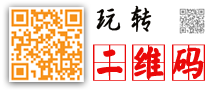
<style>
.page{position:relative;width:220px;height:91px;background:#ffffff}
.page>*{position:absolute;margin:0}
.t1{font:30px "GBHerSin-Medium";letter-spacing:0.2em;color:#090602;font-weight:bold;scale:0.89 1}
.t2{font:36px "YankaigungEG-Ultra-GB";letter-spacing:0.2em;color:#ea0a0a;font-weight:bold;scale:0.89 1}
</style>
<div class="page">
<p class="t1" style="left:96px;top:5px;width:56px;height:27px">玩转</p>
<p class="t2" style="left:93px;top:44px;width:112px;height:37px">二维码</p>
</div>
